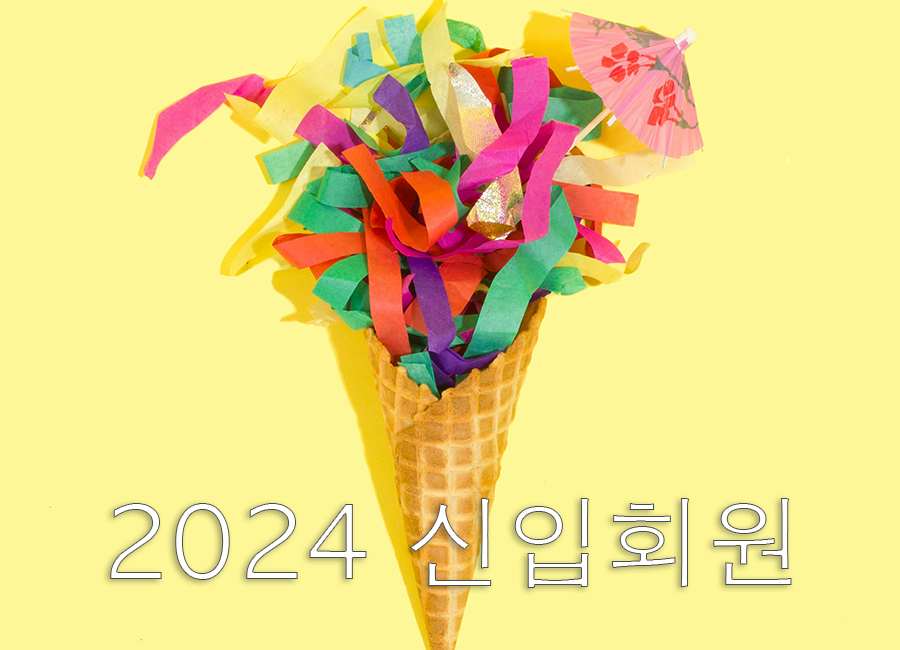
<style>
.page{position:relative;width:900px;height:650px;background:#fdf797}
.page>*{position:absolute;margin:0}
.t1{font:100px "AppleGothic";color:#ffffff}
</style>
<div class="page">
<p class="t1" style="left:110px;top:498px;width:682px;height:90px">2024 신입회원</p>
</div>
